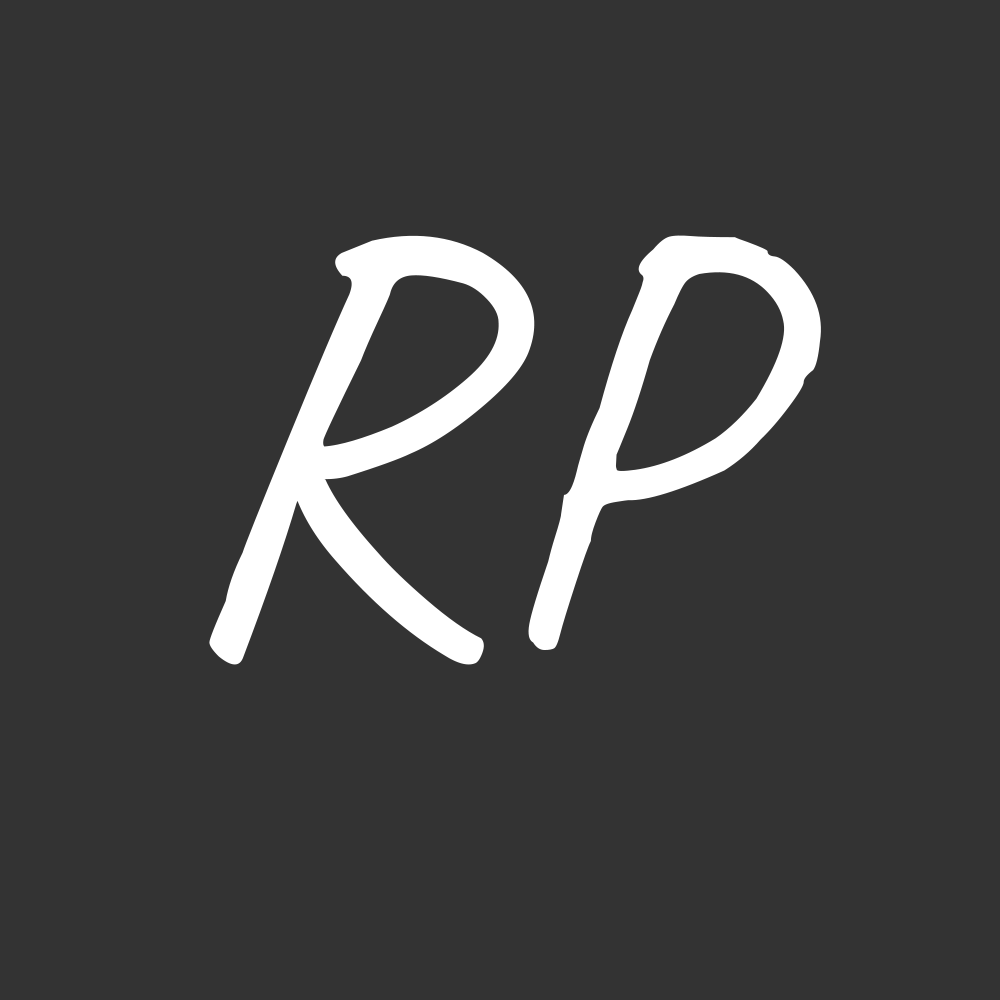
<style>
.page{position:relative;width:1000px;height:1000px;background:#333333}
.page>*{position:absolute;margin:0}
.t1{font:583.3px "Caveat-Regular";color:#ffffff}
</style>
<div class="page">
<p class="t1" style="left:209px;top:235px;width:612px;height:430px">RP</p>
</div>
